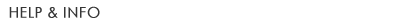
<style>
.page{position:relative;width:400px;height:24px;background:#ffffff}
.page>*{position:absolute;margin:0}
.t1{font:14.7px "FuturaBT-Light";letter-spacing:0.025em;color:#363636;text-transform:uppercase;font-weight:bold}
</style>
<div class="page">
<p class="t1" style="left:9px;top:6px;width:91px;height:12px">HELP &amp; INFO</p>
</div>
